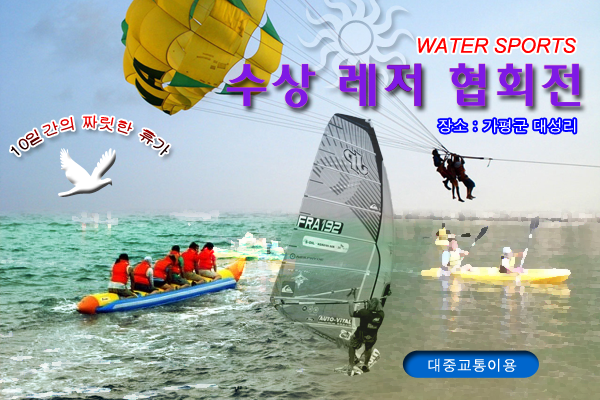
<style>
.page{position:relative;width:600px;height:400px}
.page>*{position:absolute;margin:0}
.t1{font:20px "Arial-ItalicMT";color:#ff0000}
.t2{font:15px "Gulim"}
.t3{font:15px "Dotum";color:#ffffff}
</style>
<div class="page">
<p class="t1" style="left:418px;top:38px;width:158px;height:15px">WATER SPORTS</p>
<p class="t2" style="left:11px;top:115px;width:159px;height:41px">10일간의 짜릿한 휴가</p>
<p class="t3" style="left:438px;top:119px;width:138px;height:14px">장소 : 가평군 대성리</p>
<p class="t3" style="left:428px;top:358px;width:89px;height:14px">대중교통이용</p>
</div>
